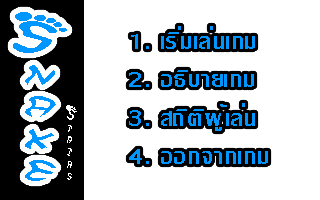
<style>
.page{position:relative;width:320px;height:200px;background:#ffffff}
.page>*{position:absolute;margin:0}
.t1{font:32px/32px "Feetish";color:#0096ff;scale:2 1}
.t2{font:48px/37.3px "Feetish";color:#0096ff;scale:2 1}
.t3{font:32px "LilyDSE";letter-spacing:0.05em;color:#0096ff}
.t4{font:10.7px/12px "Feetish";color:#ffffff}
.t5{font:16px/12px "Feetish";color:#ffffff}
</style>
<div class="page">
<p class="t1" style="left:13px;top:12px;width:54px;height:169px;text-align:center"><span class="t2">S<br></span>n<br>a<br>k<br>e</p>
<p class="t3" style="left:129px;top:26px;width:139px;height:138px">1. àÃÔèÁàÅè¹à¡Á<br>2. Í¸ÔºÒÂà¡Á<br>3. Ê¶ÔµÔ¼ÙéàÅè¹<br>4. ÍÍ¡¨Ò¡à¡Á</p>
<p class="t4" style="left:66px;top:105px;width:11px;height:75px"><span class="t5">S<br></span>t<br>a<br>i<br>r<br>s</p>
</div>
